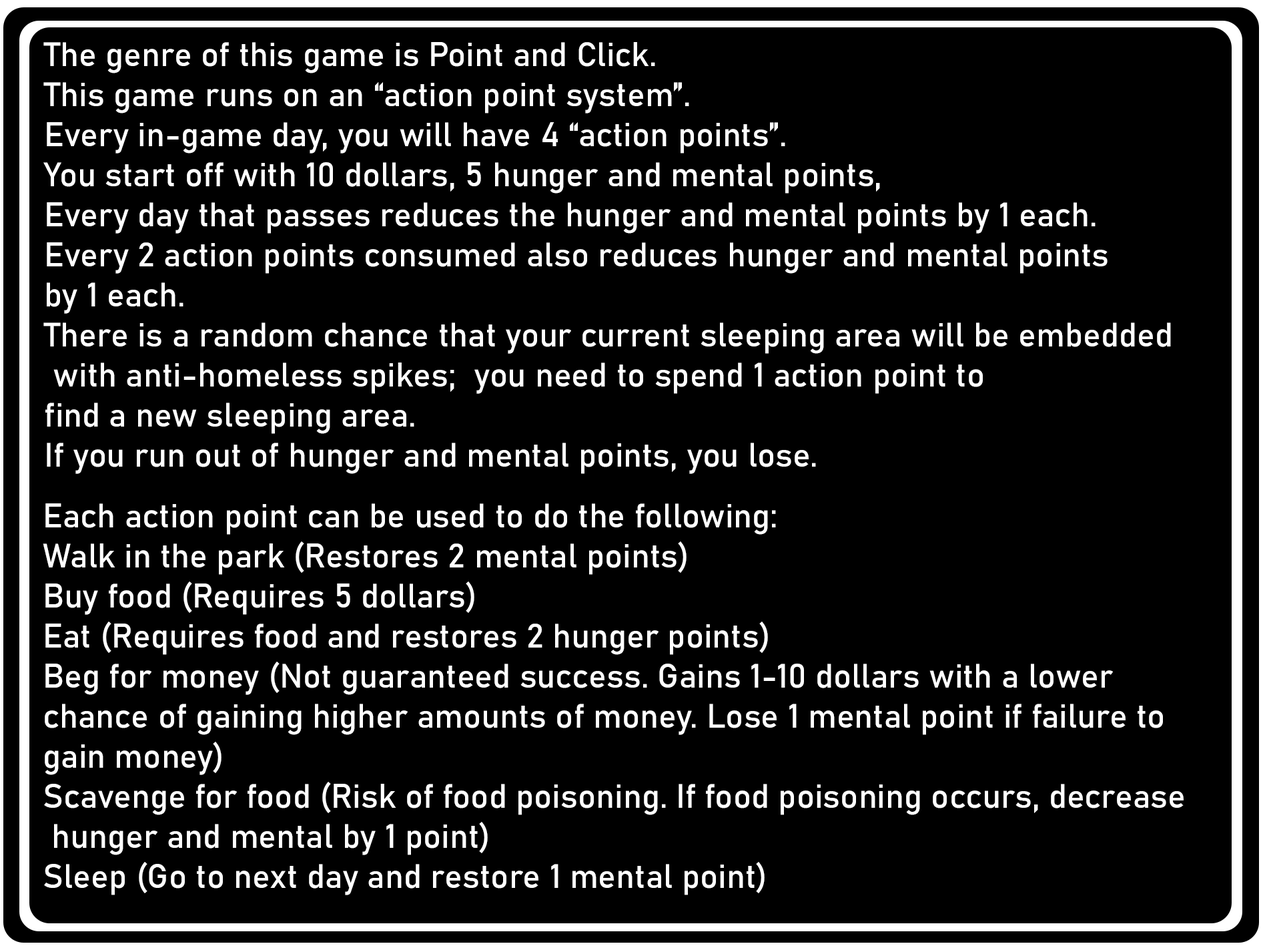
<style>
.page{position:relative;width:1261px;height:946px;background:#000000}
.page>*{position:absolute;margin:0}
.t1{font:33.4px "Bahnschrift";color:#ffffff}
</style>
<div class="page">
<p class="t1" style="left:43px;top:42px;width:1128px;height:432px">The genre of this game is Point and Click. <br>This game runs on an “action point system”. <br>Every in-game day, you will have 4 “action points”. <br>You start off with 10 dollars, 5 hunger and mental points, <br>Every day that passes reduces the hunger and mental points by 1 each. <br>Every 2 action points consumed also reduces hunger and mental points <br>by 1 each. <br>There is a random chance that your current sleeping area will be embedded<br> with anti-homeless spikes;  you need to spend 1 action point to <br>find a new sleeping area. <br>If you run out of hunger and mental points, you lose.</p>
<p class="t1" style="left:43px;top:503px;width:1141px;height:392px">Each action point can be used to do the following: <br>Walk in the park (Restores 2 mental points)<br>Buy food (Requires 5 dollars)<br>Eat (Requires food and restores 2 hunger points)<br>Beg for money (Not guaranteed success. Gains 1-10 dollars with a lower <br>chance of gaining higher amounts of money. Lose 1 mental point if failure to <br>gain money)<br>Scavenge for food (Risk of food poisoning. If food poisoning occurs, decrease<br> hunger and mental by 1 point)<br>Sleep (Go to next day and restore 1 mental point)</p>
</div>
